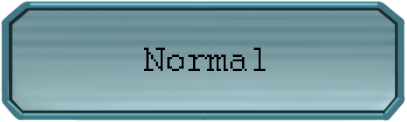
<style>
.page{position:relative;width:407px;height:122px}
.page>*{position:absolute;margin:0}
.t1{font:37.5px "Courier";color:#000000}
</style>
<div class="page">
<p class="t1" style="left:144px;top:47px;width:122px;height:24px">Normal</p>
</div>
